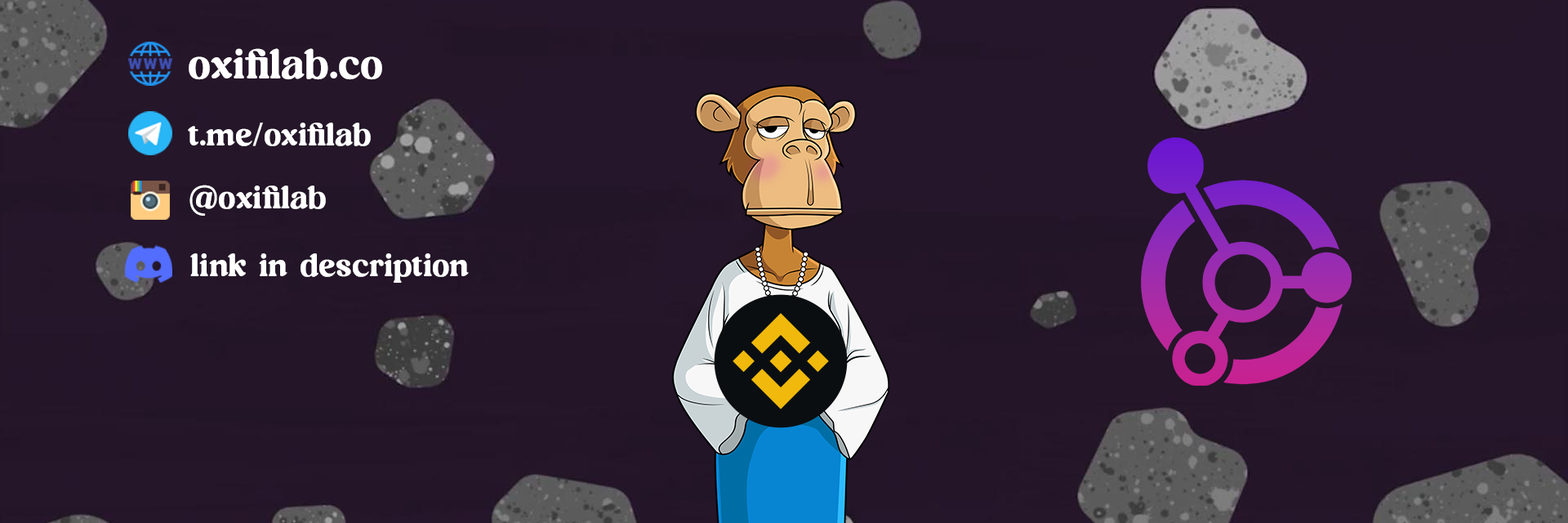
<style>
.page{position:relative;width:1568px;height:523px;background:#241528}
.page>*{position:absolute;margin:0}
.t1{font:42.6px "RichardSamuels";color:#ffffff}
.t2{font:32.7px "RichardSamuels";color:#ffffff}
</style>
<div class="page">
<p class="t1" style="left:189px;top:48px;width:193px;height:32px">oxifilab.co</p>
<p class="t2" style="left:188px;top:122px;width:183px;height:24px">t.me/oxifilab</p>
<p class="t2" style="left:189px;top:185px;width:137px;height:31px">@oxifilab</p>
<p class="t2" style="left:190px;top:253px;width:279px;height:30px">link in description</p>
</div>
